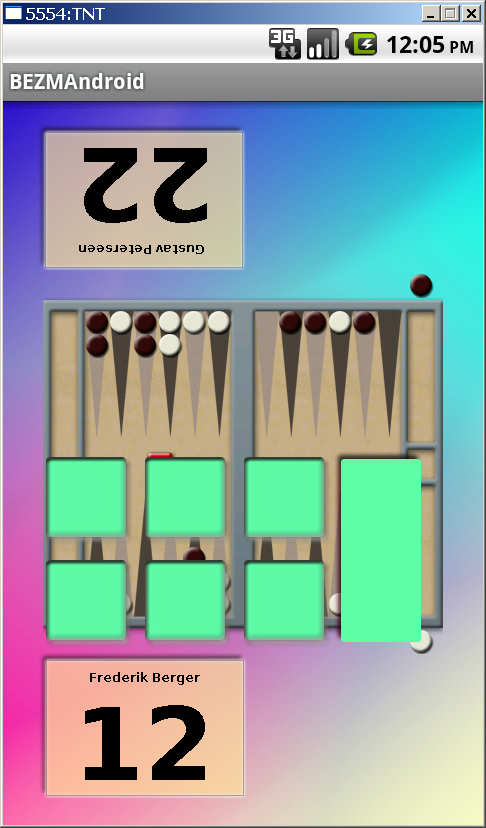
<style>
.page{position:relative;width:486px;height:828px}
.page>*{position:absolute;margin:0}
.t1{font:100px "DejaVuSans-Bold";color:#000000}
.t2{font:12px "DejaVuSans-Bold";color:#000000}
</style>
<div class="page">
<p class="t1" style="left:84px;top:148px;width:123px;height:75px;rotate:180deg">22</p>
<p class="t2" style="left:79px;top:245px;width:125px;height:9px;rotate:180deg">Gustav Peterseen</p>
<p class="t2" style="left:90px;top:672px;width:110px;height:13px">Frederik Berger</p>
<p class="t1" style="left:85px;top:705px;width:120px;height:75px">12</p>
</div>
